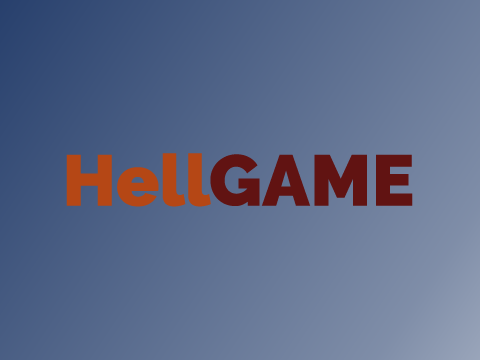
<style>
.page{position:relative;width:480px;height:360px}
.page>*{position:absolute;margin:0}
.t1{font:72px "Raleway-Black";color:#b54715}
.t2{font:72px "Raleway-Black";color:#611312}
</style>
<div class="page">
<p class="t1" style="left:66px;top:153px;width:347px;height:54px">Hell<span class="t2">GAME</span></p>
</div>
